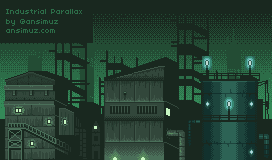
<style>
.page{position:relative;width:272px;height:160px;background:#19281f}
.page>*{position:absolute;margin:0}
.t1{font:8.1px "04b03";color:#2c6d48}
</style>
<div class="page">
<p class="t1" style="left:6px;top:9px;width:76px;height:24px">Industrial Parallax<br>by @ansimuz<br>ansimuz.com</p>
</div>
